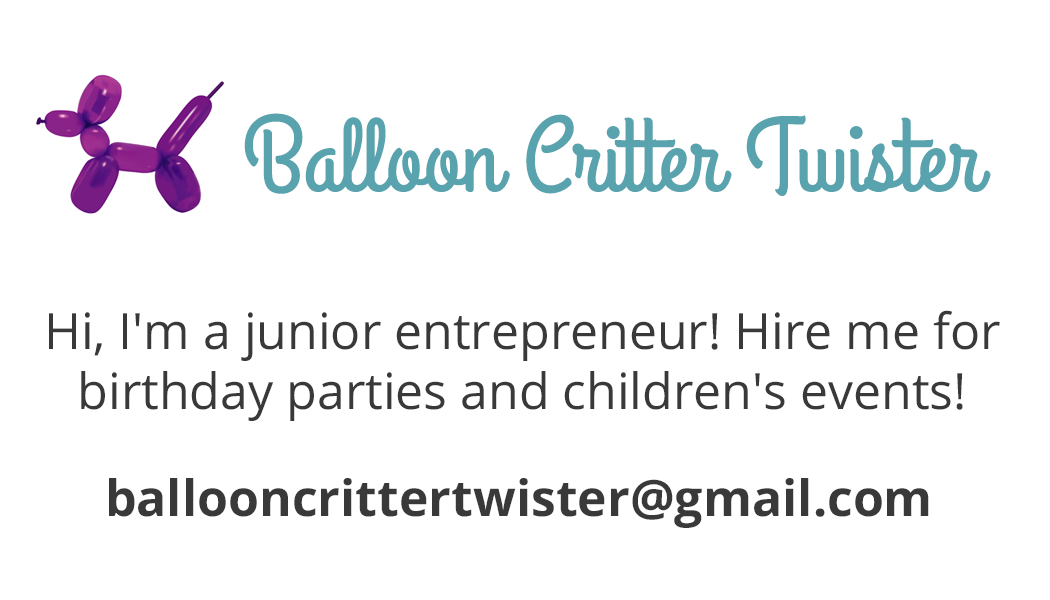
<style>
.page{position:relative;width:1050px;height:600px;background:#ffffff}
.page>*{position:absolute;margin:0}
.t1{font:104.2px "GrandHotel-Regular";color:#58a3ae}
.t2{font:50px "OpenSans";color:#393939}
.t3{font:50px "OpenSans-Bold";color:#393939}
</style>
<div class="page">
<p class="t1" style="left:244px;top:113px;width:747px;height:83px">Balloon Critter Twister</p>
<p class="t2" style="left:49px;top:310px;width:951px;height:111px;text-align:center">Hi, I'm a junior entrepreneur! Hire me for <br>birthday parties and children's events!</p>
<p class="t3" style="left:109px;top:478px;width:820px;height:50px">ballooncrittertwister@gmail.com</p>
</div>
